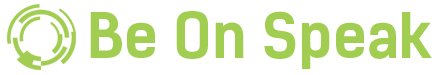
<style>
.page{position:relative;width:436px;height:75px;background:#ffffff}
.page>*{position:absolute;margin:0}
.t1{font:60px "KelsonSans-BoldRU";color:#a1cd51}
</style>
<div class="page">
<p class="t1" style="left:90px;top:11px;width:342px;height:58px">Be On Speak</p>
</div>
